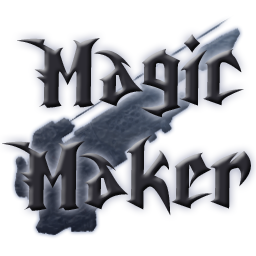
<style>
.page{position:relative;width:256px;height:256px;background:#ffffff}
.page>*{position:absolute;margin:0}
.t1{font:85.8px "UnrealTournament";scale:0.83 1}
</style>
<div class="page">
<p class="t1" style="left:2px;top:34px;width:249px;height:182px;text-align:center;rotate:-1deg">Magic<br>Maker</p>
</div>
